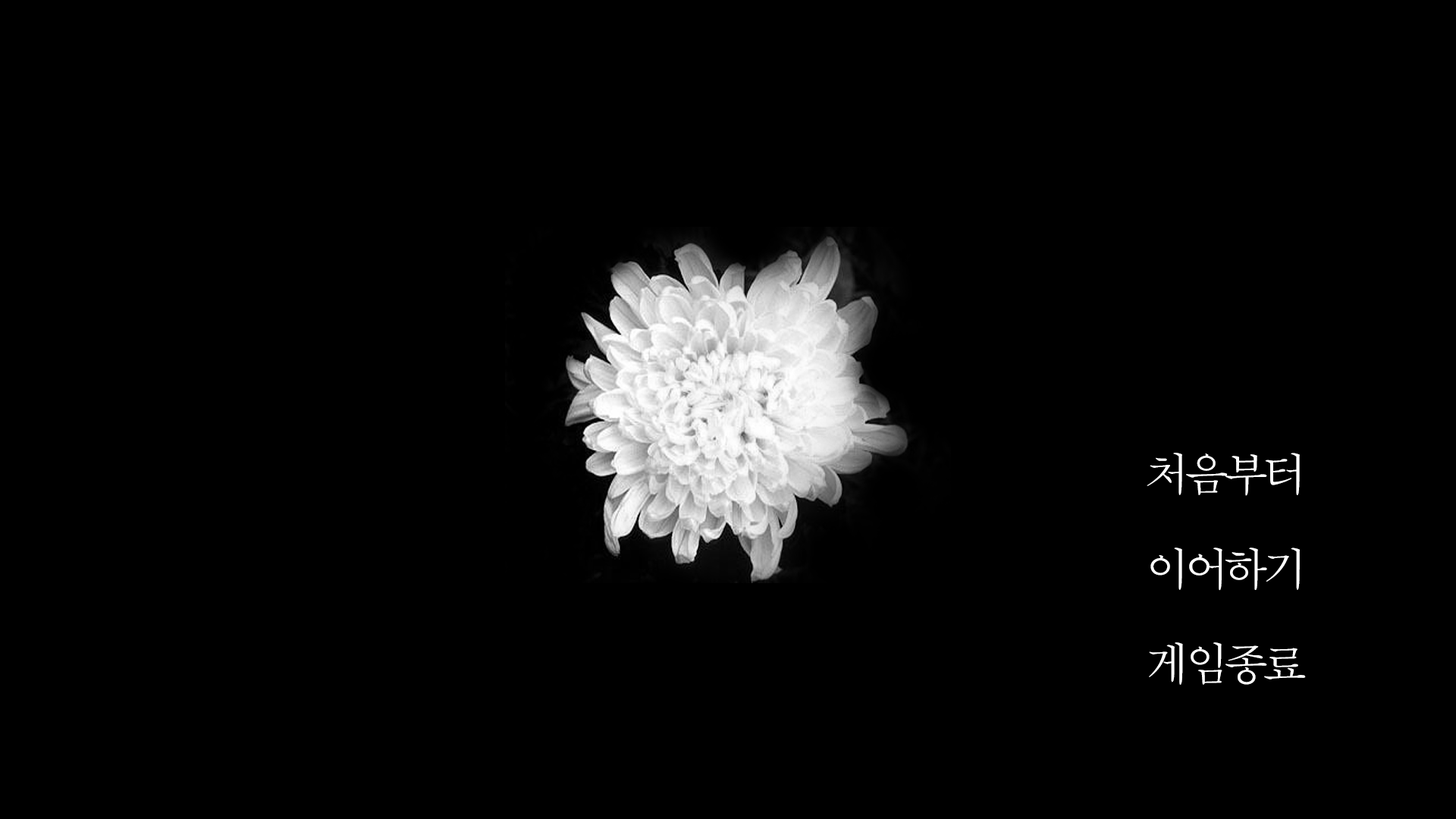
<style>
.page{position:relative;width:1456px;height:819px;background:#000000}
.page>*{position:absolute;margin:0}
.t1{font:47.4px/94.8px "SDMyeongjo-aLt";letter-spacing:-0.075em;color:#ffffff}
</style>
<div class="page">
<p class="t1" style="left:1147px;top:453px;width:159px;height:232px;text-align:center">처음부터<br>이어하기<br>게임종료</p>
</div>
